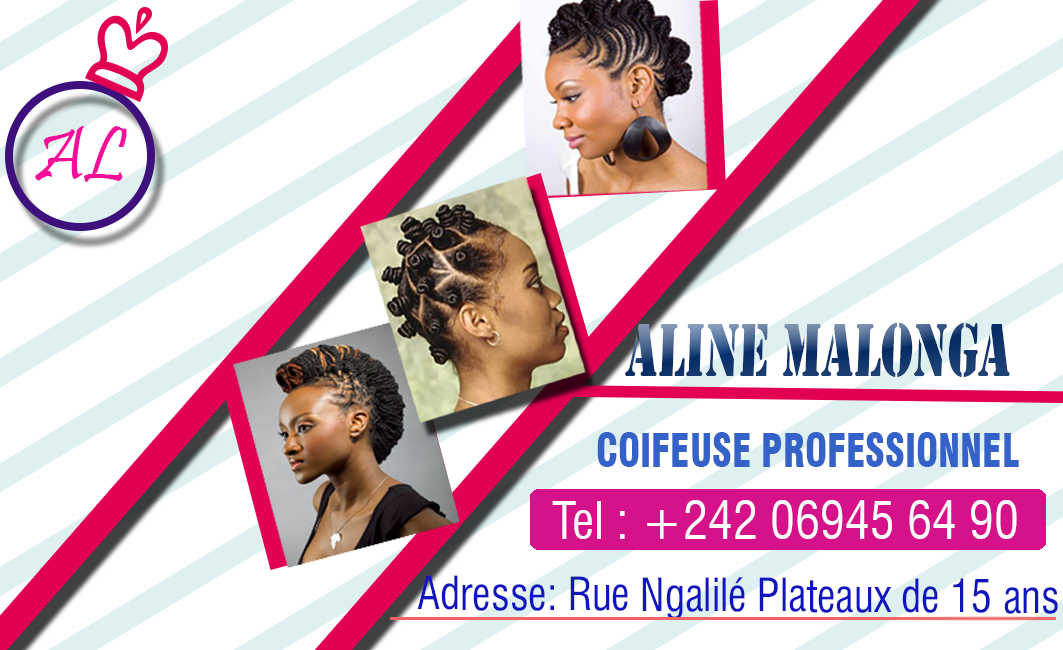
<style>
.page{position:relative;width:1063px;height:650px;background:#ffffff}
.page>*{position:absolute;margin:0}
.t1{font:18.4px "Pristina-Regular";color:#f40f9b}
.t2{font:78.5px "Stencil";scale:0.65 1}
.t3{font:44.7px "Swiss721BT-BlackCondensed";color:#3562c8;scale:0.84 1}
.t4{font:50px "Swiss721BT-RomanCondensed";color:#fcfcfc}
.t5{font:10.7px "Swiss721BT-RomanCondensed";color:#1115bf;scale:0.94 1}
</style>
<div class="page">
<p class="t1" style="left:35px;top:126px;width:92px;height:56px;text-align:center">AL</p>
<p class="t2" style="left:625px;top:322px;width:385px;height:55px">Aline MALONGA</p>
<p class="t3" style="left:597px;top:432px;width:422px;height:35px">COIFEUSE PROFESSIONNEL</p>
<p class="t4" style="left:552px;top:500px;width:465px;height:39px">Tel : +242 06945 64 90</p>
<p class="t5" style="left:417px;top:575px;width:641px;height:45px;text-align:center">Adresse: Rue Ngalilé Plateaux de 15 ans</p>
</div>
